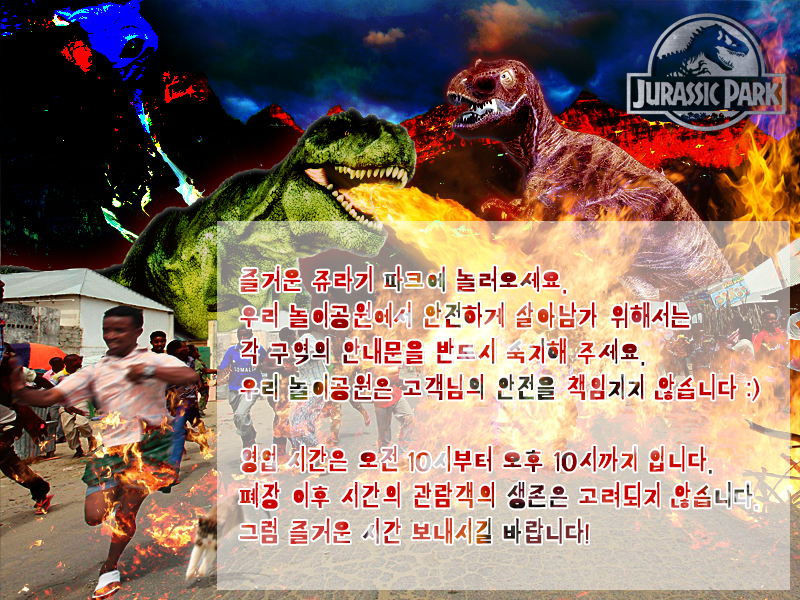
<style>
.page{position:relative;width:800px;height:600px}
.page>*{position:absolute;margin:0}
.t1{font:30px "KirangHaerang-Regular"}
</style>
<div class="page">
<p class="t1" style="left:239px;top:266px;width:521px;height:278px">즐거운 쥬라기 파크에 놀러오세요.<br>우리 놀이공원에서 안전하게 살아남가 위해서는 <br>각 구역의 안내문을 반드시 숙지해 주세요.<br>우리 놀이공원은 고객님의 안전을 책임지지 않습니다 :)<br><br>영업 시간은 오전 10시부터 오후 10시까지 입니다.<br>폐장 이후 시간의 관람객의 생존은 고려되지 않습니다. <br>그럼 즐거운 시간 보내시길 바랍니다!</p>
</div>
